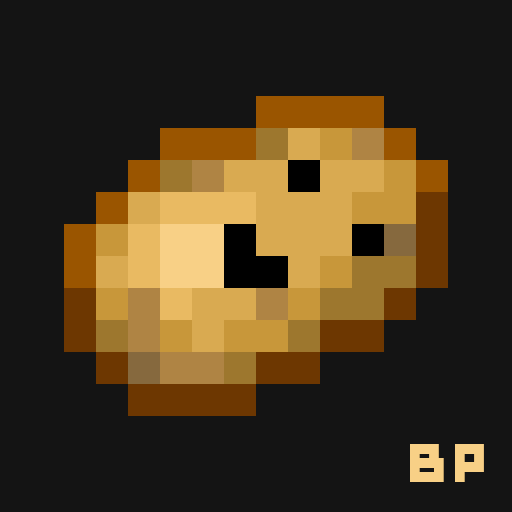
<style>
.page{position:relative;width:512px;height:512px;background:#141414}
.page>*{position:absolute;margin:0}
.t1{font:48px "BulkyPixels";color:#f8d086}
</style>
<div class="page">
<p class="t1" style="left:410px;top:444px;width:74px;height:38px">BP</p>
</div>
